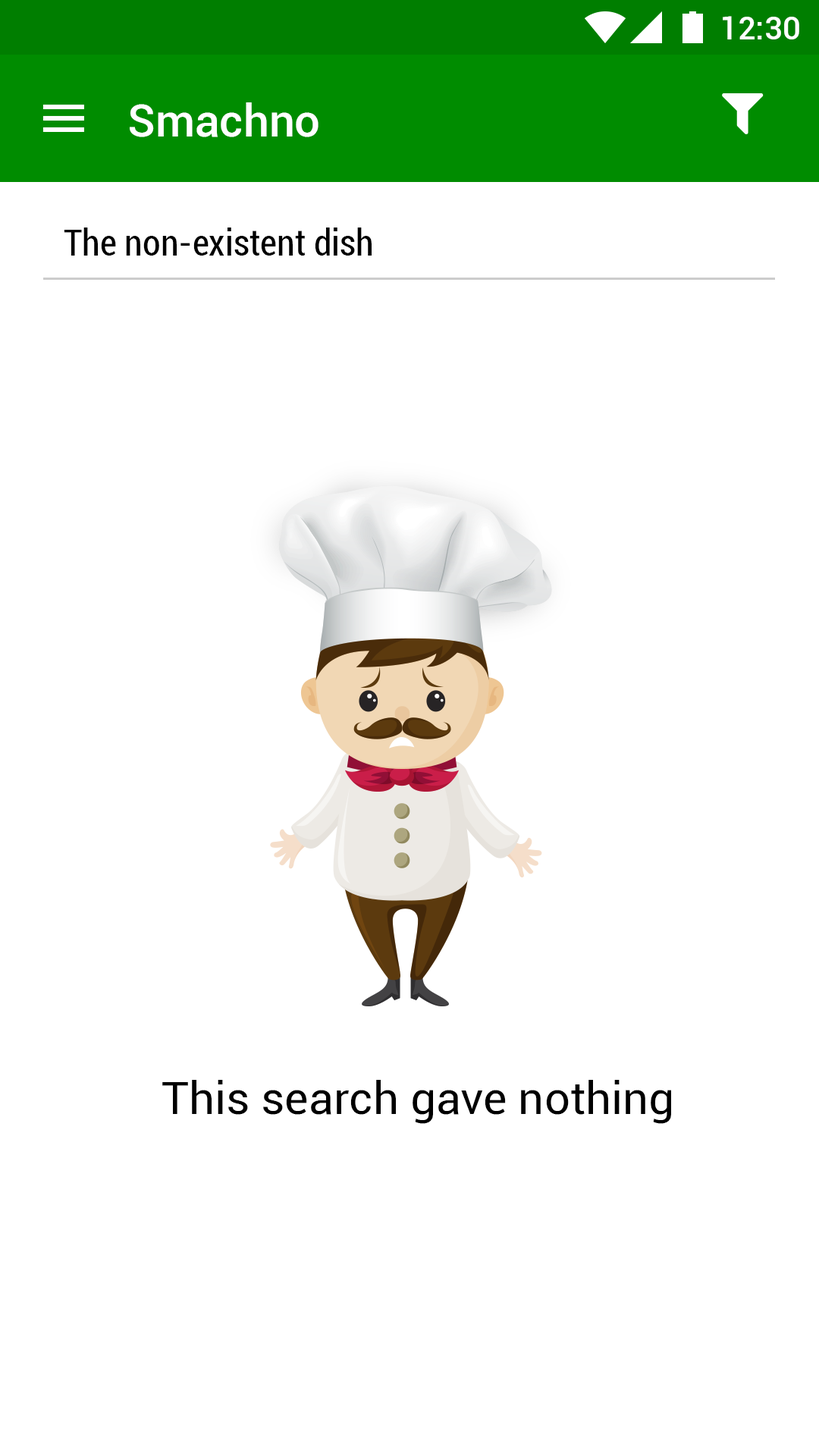
<style>
.page{position:relative;width:819px;height:1456px;background:#ffffff}
.page>*{position:absolute;margin:0}
.t1{font:31.9px "Roboto-Medium";color:#ffffff}
.t2{font:45.5px "Roboto-Medium";color:#ffffff}
.t3{font:36.4px "Roboto-Condensed";color:#000000}
.t4{font:45.5px "Roboto-Regular";color:#000000}
</style>
<div class="page">
<p class="t1" style="left:723px;top:16px;width:76px;height:23px">12:30</p>
<p class="t2" style="left:130px;top:102px;width:188px;height:35px">Smachno</p>
<p class="t3" style="left:64px;top:227px;width:308px;height:29px">The non-existent dish</p>
<p class="t4" style="left:162px;top:1080px;width:509px;height:44px">This search gave nothing</p>
</div>
